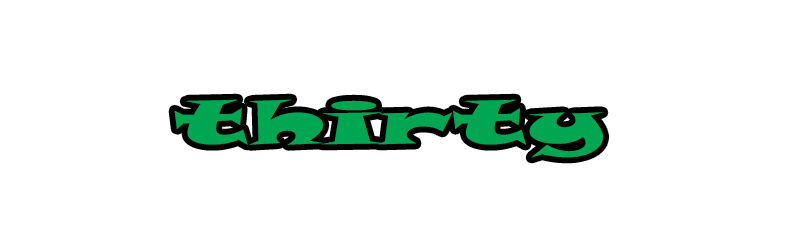
<style>
.page{position:relative;width:812px;height:249px;background:#ffffff}
.page>*{position:absolute;margin:0}
.t1{font:60px "SnapITC-Regular";color:#00a651;scale:2 1}
</style>
<div class="page">
<p class="t1" style="left:174px;top:99px;width:429px;height:59px">thirty</p>
</div>
